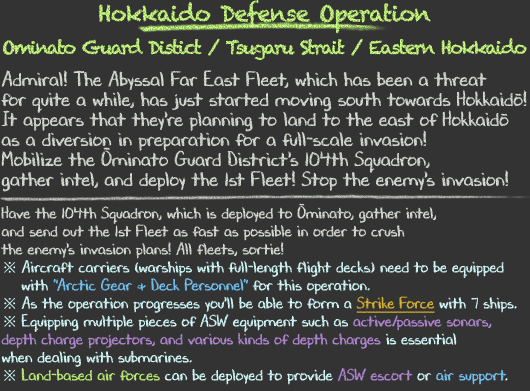
<style>
.page{position:relative;width:530px;height:391px;background:#333333}
.page>*{position:absolute;margin:0}
.t1{font:18px/36px "Chalkduster";letter-spacing:-0.09em}
.t2{font:22px/36px "Chalkduster";letter-spacing:-0.04em}
.t3{font:20px/20px "DJBChalkItUp";color:#d9ded6}
.t4{font:16px/18px "DJBChalkItUp";color:#d9ded6}
.t5{font:16px/18px "TimesNewRomanPSMT";color:#d7feff}
.t6{font:16px/18px "DJBChalkItUp";color:#d7feff}
.t7{font:16px/18px "DJBChalkItUp";color:#76c8fb}
.t8{font:16px/18px "DJBChalkItUp";color:#dfb731;text-decoration:underline}
.t9{font:16px/18px "DJBChalkItUp";color:#b489d6}
.t10{font:16px/18px "DJBChalkItUp";color:#bdef78}
</style>
<div class="page">
<p class="t1" style="left:3px;top:0px;width:524px;height:60px;text-align:center"><span class="t2">Hokkaido Defense Operation<br></span>Ominato Guard Distict / Tsugaru Strait / Eastern Hokkaido</p>
<p class="t3" style="left:1px;top:70px;width:526px;height:315px">Admiral! The Abyssal Far East Fleet, which has been a threat<br>for quite a while, has just started moving south towards Hokkaidō!<br>It appears that they're planning to land to the east of Hokkaidō<br>as a diversion in preparation for a full-scale invasion!<br>Mobilize the Ōminato Guard District's 104th Squadron,<br>gather intel, and deploy the 1st Fleet! Stop the enemy's invasion!<br><br><span class="t4">Have the 104th Squadron, which is deployed to Ōminato, gather intel,<br>and send out the 1st Fleet as fast as possible in order to crush<br>the enemy's invasion plans! All fleets, sortie!<br></span><span class="t5">※ </span><span class="t6">Aircraft carriers (warships with full-length flight decks) need to be equipped<br>　 with </span><span class="t7">"Arctic Gear &amp; Deck Personnel"</span><span class="t6"> for this operation.<br></span><span class="t5">※ </span><span class="t6">As the operation progresses you'll be able to form a </span><span class="t8">Strike Force</span><span class="t6"> with 7 ships.<br></span><span class="t5">※ </span><span class="t6">Equipping multiple pieces of ASW equipment such as </span><span class="t9">active/passive sonars,<br>depth charge projectors, and various kinds of depth charges</span><span class="t6"> is essential<br>when dealing with submarines.<br></span><span class="t5">※ </span><span class="t10">Land-based air forces</span><span class="t6"> can be deployed to provide </span><span class="t9">ASW escort</span><span class="t6"> or </span><span class="t7">air support</span><span class="t6">.</span></p>
</div>
